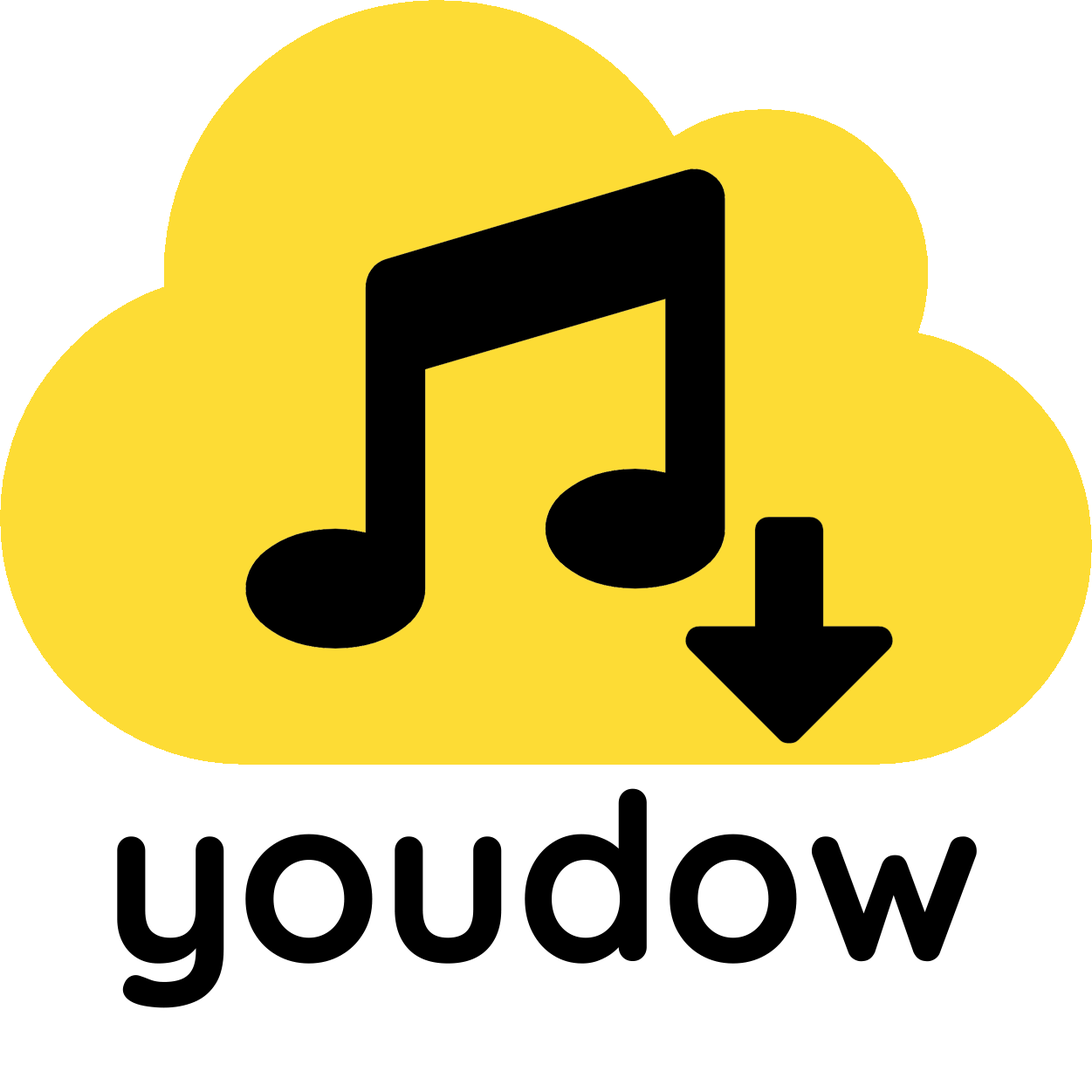
<style>
.page{position:relative;width:1092px;height:1092px;background:#fddc35}
.page>*{position:absolute;margin:0}
.t1{font:232.8px "Quicksand-Bold";color:#000000;font-weight:bold}
</style>
<div class="page">
<p class="t1" style="left:117px;top:788px;width:860px;height:220px">youdow</p>
</div>
